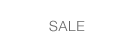
<style>
.page{position:relative;width:133px;height:50px;background:#ffffff}
.page>*{position:absolute;margin:0}
.t1{font:14px "HelveticaNeue-Light";letter-spacing:0.05em;color:#646464}
</style>
<div class="page">
<p class="t1" style="left:49px;top:20px;width:36px;height:12px">SALE</p>
</div>
